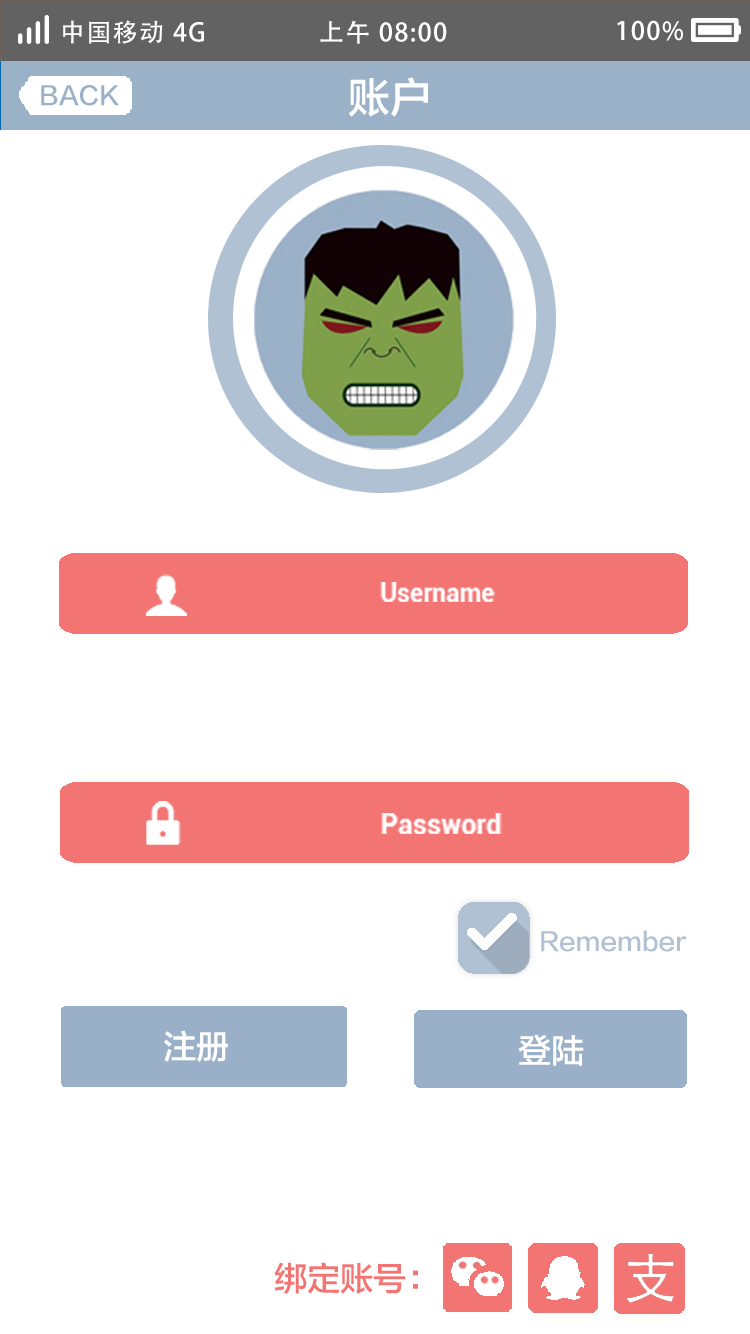
<style>
.page{position:relative;width:750px;height:1334px;background:#ffffff}
.page>*{position:absolute;margin:0}
.t1{font:25px "AdobeHeitiStd-Regular";letter-spacing:0.06em;color:#ffffff}
.t2{font:41.7px "FZLTZHK--GBK1-0";color:#ffffff;text-transform:uppercase}
.t3{font:25px "FZLTZHK--GBK1-0";color:#9bb1c8;text-transform:uppercase}
.t4{font:25.2px "Roboto-Bold";color:#ffffff}
.t5{font:27.3px "Roboto-Bold";color:#ffffff}
.t6{font:25px "FZLTZHK--GBK1-0";color:#afc1d3}
.t7{font:33.3px "FZLTZHK--GBK1-0";color:#ffffff}
.t8{font:33.3px "FZLTZHK--GBK1-0";color:#f27473}
</style>
<div class="page">
<p class="t1" style="left:63px;top:20px;width:141px;height:24px">中国移动 4G</p>
<p class="t1" style="left:320px;top:20px;width:127px;height:24px">上午 08:00</p>
<p class="t1" style="left:617px;top:20px;width:66px;height:21px">100%</p>
<p class="t2" style="left:349px;top:77px;width:79px;height:40px">账户</p>
<p class="t3" style="left:41px;top:84px;width:78px;height:22px">back</p>
<p class="t4" style="left:380px;top:582px;width:115px;height:20px">Username</p>
<p class="t5" style="left:381px;top:813px;width:121px;height:21px">Password</p>
<p class="t6" style="left:541px;top:930px;width:146px;height:22px">Remember</p>
<p class="t7" style="left:164px;top:1030px;width:64px;height:32px">注册</p>
<p class="t7" style="left:518px;top:1034px;width:66px;height:32px">登陆</p>
<p class="t8" style="left:274px;top:1262px;width:144px;height:32px">绑定账号：</p>
</div>
